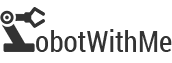
<style>
.page{position:relative;width:172px;height:63px;background:#ffffff}
.page>*{position:absolute;margin:0}
.t1{font:29px "RobotoCondensed-Regular";color:#333333}
</style>
<div class="page">
<p class="t1" style="left:36px;top:29px;width:136px;height:23px">obotWithMe</p>
</div>
